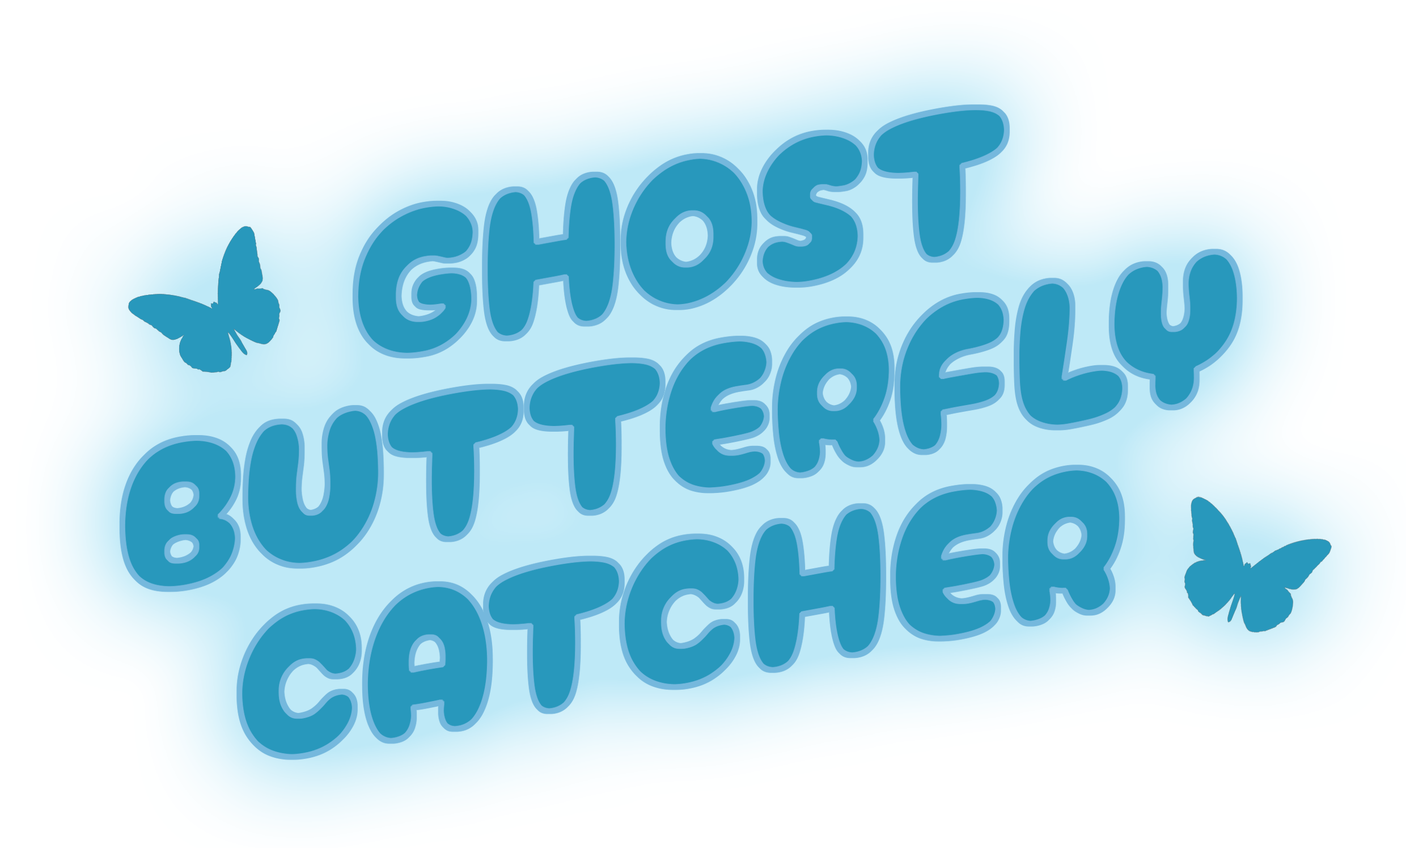
<style>
.page{position:relative;width:1406px;height:848px;background:#ffffff}
.page>*{position:absolute;margin:0}
.t1{font:213px/190.3px "CherryBombOne-Regular";color:#2898bc;scale:0.92 1}
</style>
<div class="page">
<p class="t1" style="left:122px;top:107px;width:1118px;height:650px;text-align:center;rotate:-10deg">GHOST<br>BUTTERFLY<br>CATCHER</p>
</div>
